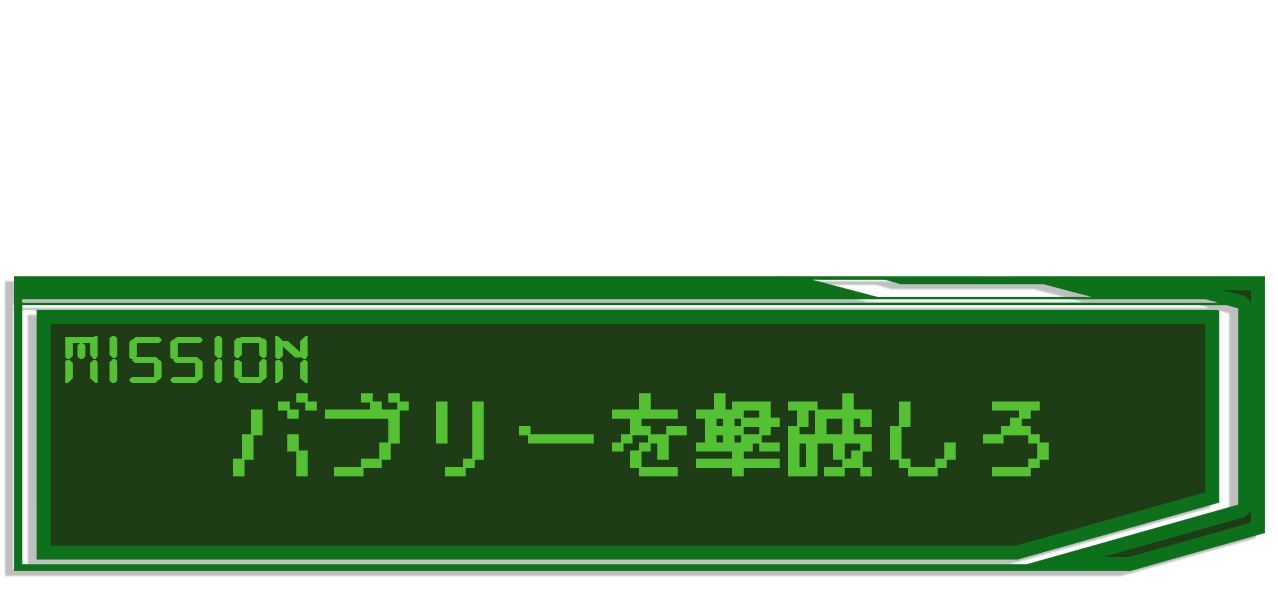
<style>
.page{position:relative;width:1278px;height:590px;background:#ffffff}
.page>*{position:absolute;margin:0}
.t1{font:72px "DS-Digital";color:#54c132;font-weight:bold;scale:1.1 1}
.t2{font:82px "PixelMplus10-Regular";color:#54c132;font-weight:bold;scale:1.1 1}
</style>
<div class="page">
<p class="t1" style="left:65px;top:336px;width:243px;height:47px">MISSION</p>
<p class="t2" style="left:233px;top:393px;width:816px;height:84px">バブリーを撃破しろ</p>
</div>
